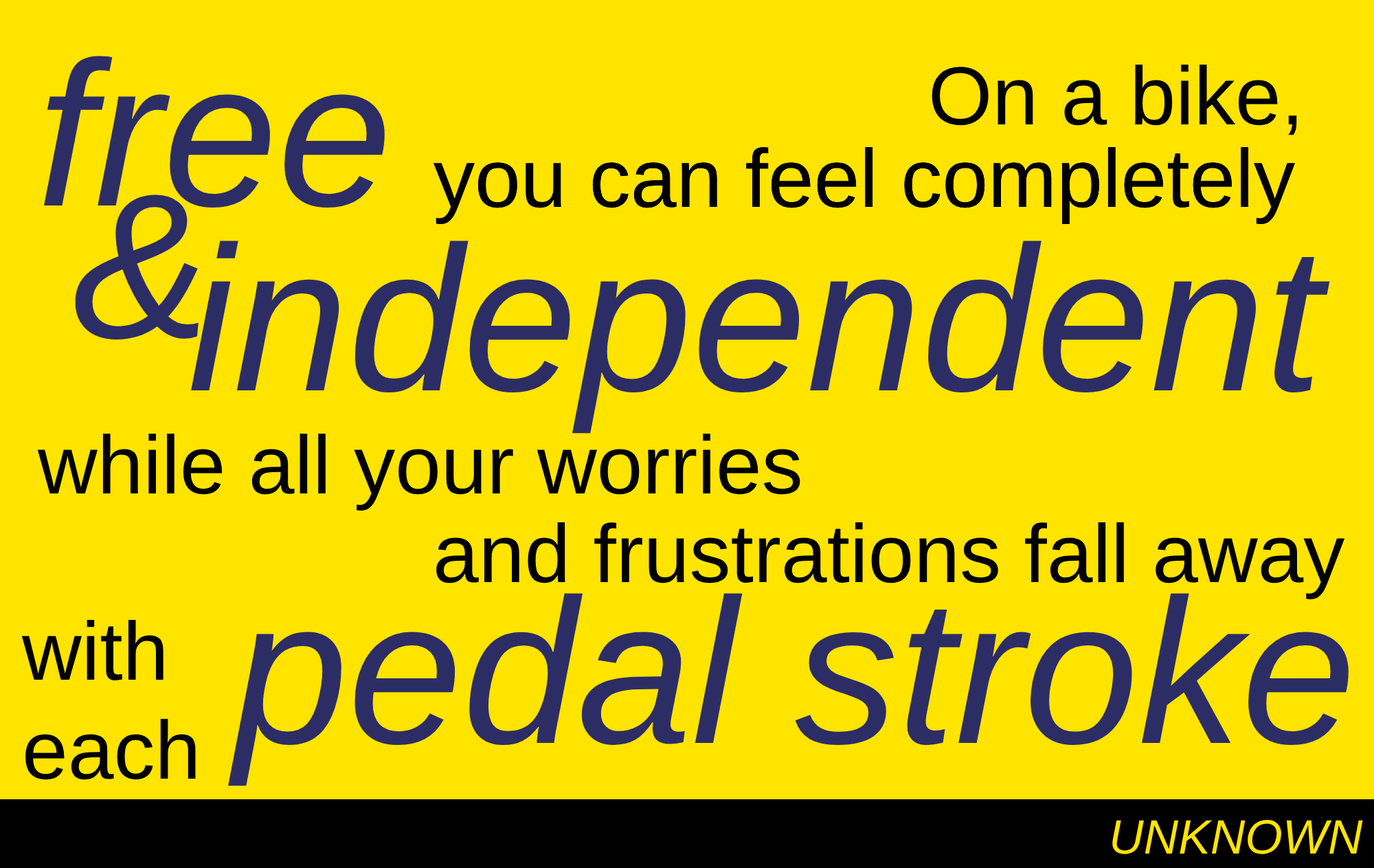
<style>
.page{position:relative;width:1374px;height:868px;background:#ffe400}
.page>*{position:absolute;margin:0}
.t1{font:206.1px "Arial-ItalicMT";color:#2d2d66}
.t2{font:82.4px "ArialMT";color:#000000}
.t3{font:48.1px "Arial-ItalicMT";color:#ffe400}
</style>
<div class="page">
<p class="t1" style="left:44px;top:56px;width:341px;height:151px">free</p>
<p class="t2" style="left:932px;top:65px;width:365px;height:70px">On a bike,</p>
<p class="t2" style="left:434px;top:147px;width:861px;height:77px">you can feel completely</p>
<p class="t2" style="left:434px;top:147px;width:861px;height:77px">you can feel completely</p>
<p class="t1" style="left:75px;top:194px;width:124px;height:145px">&amp;</p>
<p class="t1" style="left:191px;top:240px;width:1139px;height:194px">independent</p>
<p class="t2" style="left:37px;top:434px;width:763px;height:76px">while all your worries</p>
<p class="t2" style="left:436px;top:522px;width:909px;height:77px">and frustrations fall away</p>
<p class="t1" style="left:228px;top:593px;width:1121px;height:193px">pedal stroke</p>
<p class="t2" style="left:21px;top:620px;width:175px;height:160px">with <br>each</p>
<p class="t3" style="left:1112px;top:820px;width:251px;height:34px">UNKNOWN</p>
</div>
